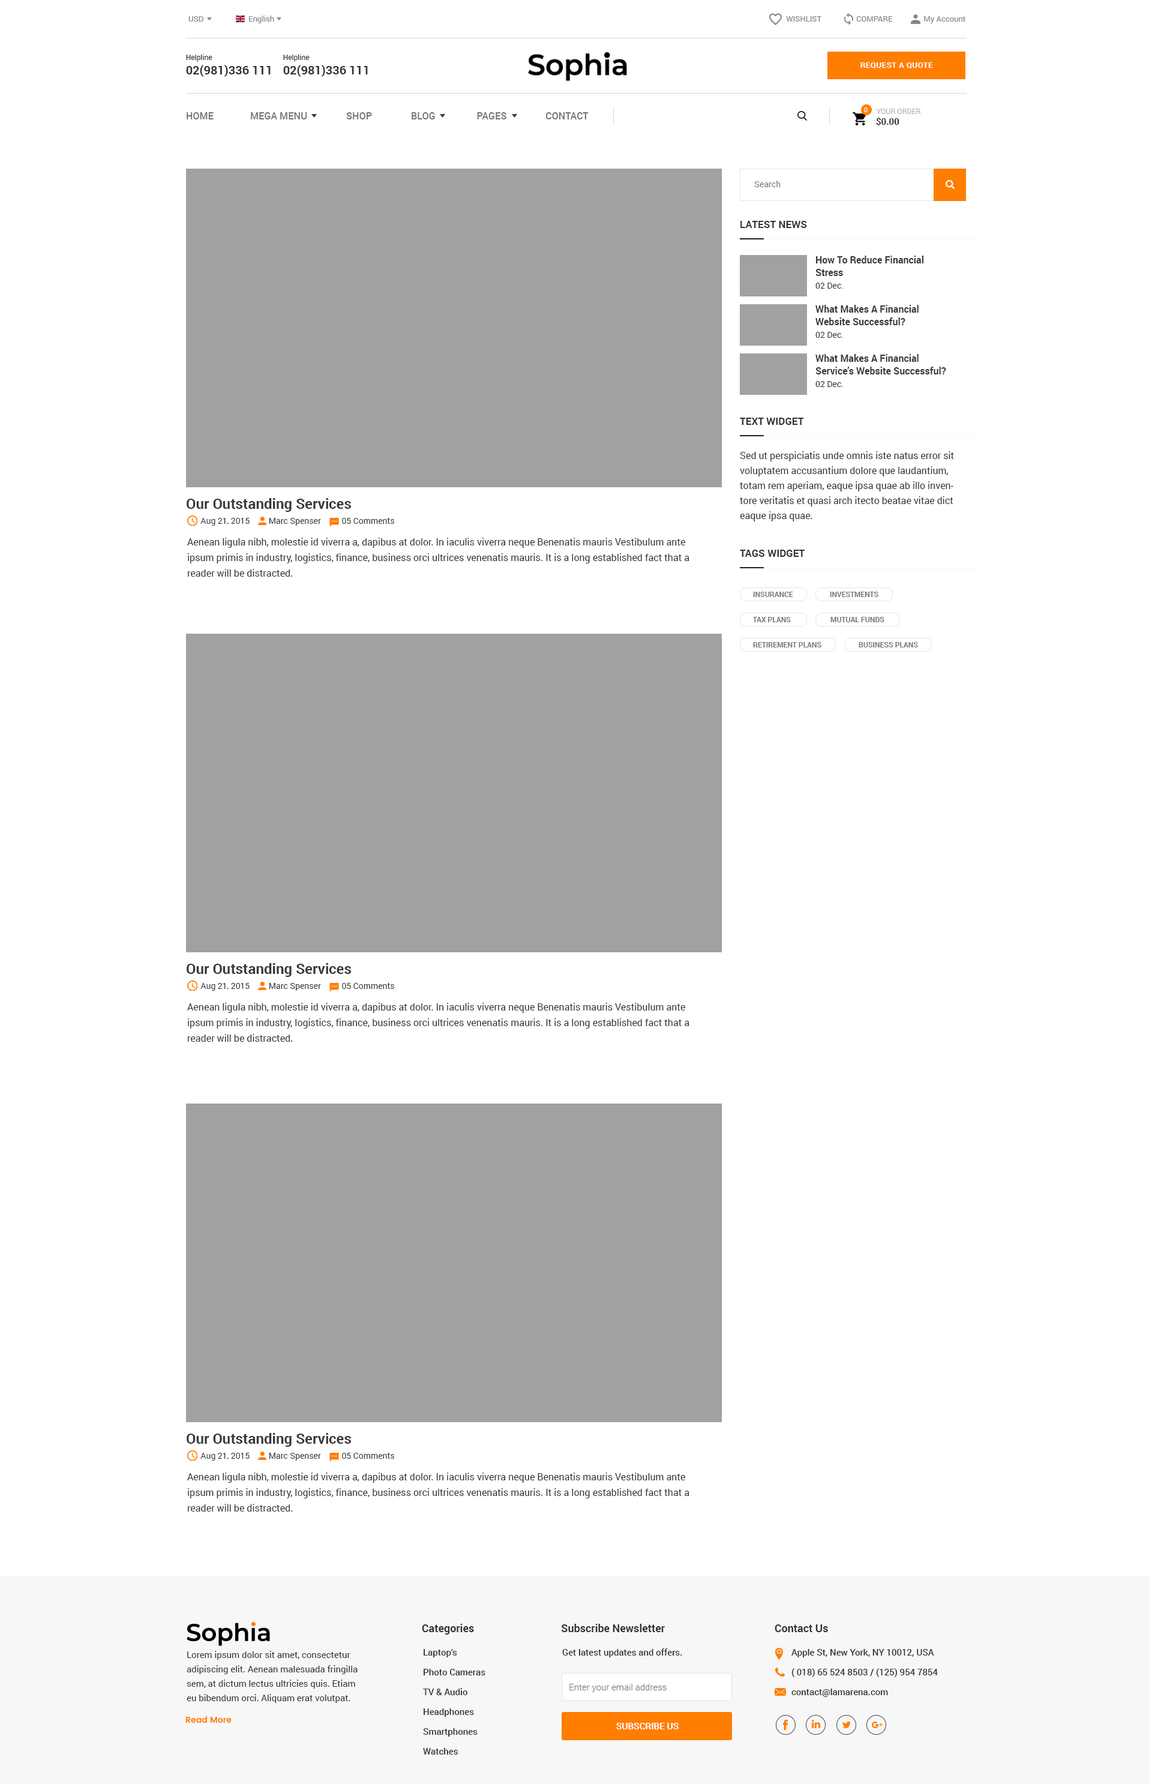
<style>
.page{position:relative;width:1152px;height:1784px;background:#ffffff}
.page>*{position:absolute;margin:0}
.t1{font:7.8px "Roboto-Regular";color:#81858c}
.t2{font:12px "Roboto-Bold";color:#333333}
.t3{font:7.2px "Roboto-Regular";color:#333333}
.t4{font:7.8px "Roboto-Bold";letter-spacing:0.04em;color:#ffffff}
.t5{font:9.6px "Roboto-Medium";color:#737373}
.t6{font:6.6px "Roboto-Regular";color:#ffffff}
.t7{font:7.2px "Roboto-Regular";color:#b8b7b7}
.t8{font:9px "Roboto-Bold";color:#333333}
.t9{font:8.4px "Roboto-Regular";color:#777777}
.t10{font:10.2px "Roboto-Bold";color:#333333}
.t11{font:9.6px/12.6px "Roboto-Bold";color:#383838}
.t12{font:8.4px/12.6px "Roboto-Regular";color:#333333}
.t13{font:9.6px/15px "Roboto-Regular";color:#333333}
.t14{font:8.4px/15px "Roboto-Regular";color:#333333}
.t15{font:14.4px/15px "Roboto-Bold";color:#383838}
.t16{font:9.6px/15.6px "Roboto-Regular";color:#333333}
.t17{font:7.2px "Roboto-Bold";color:#787878}
.t18{font:10.8px "Roboto-Bold";color:#333333}
.t19{font:9px/19.8px "Roboto-Medium";color:#333333}
.t20{font:9px "Roboto-Medium";color:#333333}
.t21{font:9px/14.4px "Roboto-Regular";color:#333333}
.t22{font:9px "Roboto-Light";color:#777777}
.t23{font:8.1px "Poppins-SemiBold";color:#ff7e00}
.t24{font:9px "Roboto-Bold";color:#ffffff}
</style>
<div class="page">
<p class="t1" style="left:188px;top:16px;width:15px;height:6px">USD</p>
<p class="t1" style="left:249px;top:16px;width:25px;height:7px">English</p>
<p class="t1" style="left:786px;top:16px;width:179px;height:7px">WISHLIST                  COMPARE                My Account</p>
<p class="t2" style="left:186px;top:54px;width:85px;height:23px"><span class="t3">Helpline<br></span>02(981)336 111</p>
<p class="t2" style="left:283px;top:54px;width:85px;height:23px"><span class="t3">Helpline<br></span>02(981)336 111</p>
<p class="t4" style="left:860px;top:62px;width:73px;height:6px">REQUEST A QUOTE</p>
<p class="t5" style="left:187px;top:112px;width:402px;height:7px">HOME               MEGA MENU                SHOP                BLOG                 PAGES                CONTACT</p>
<p class="t6" style="left:864px;top:107px;width:4px;height:5px">0</p>
<p class="t7" style="left:877px;top:109px;width:43px;height:5px">YOUR ORDER</p>
<p class="t8" style="left:876px;top:117px;width:23px;height:9px">$0.00</p>
<p class="t9" style="left:754px;top:181px;width:27px;height:6px">Search</p>
<p class="t10" style="left:740px;top:221px;width:67px;height:7px">LATEST NEWS</p>
<p class="t11" style="left:815px;top:256px;width:108px;height:33px">How To Reduce Financial Stress <br><span class="t12">02 Dec.</span></p>
<p class="t11" style="left:815px;top:305px;width:104px;height:33px">What Makes A Financial Website Successful?  <br><span class="t12">02 Dec.</span></p>
<p class="t11" style="left:815px;top:354px;width:131px;height:33px">What Makes A Financial Service’s Website Successful?  <br><span class="t12">02 Dec.</span></p>
<p class="t10" style="left:740px;top:418px;width:64px;height:7px">TEXT WIDGET</p>
<p class="t13" style="left:740px;top:451px;width:214px;height:70px">Sed ut perspiciatis unde omnis iste natus error sit voluptatem accusantium dolore que laudantium, totam rem aperiam, eaque ipsa quae ab illo inventore veritatis et quasi arch itecto beatae vitae dict eaque ipsa quae.</p>
<p class="t14" style="left:187px;top:498px;width:207px;height:28px"><span class="t15">Our Outstanding Services <br></span>       Aug 21, 2015         Marc Spenser          05 Comments</p>
<p class="t16" style="left:187px;top:538px;width:502px;height:39px">Aenean ligula nibh, molestie id viverra a, dapibus at dolor. In iaculis viverra neque Benenatis mauris Vestibulum ante ipsum primis in industry, logistics, finance, business orci ultrices venenatis mauris. It is a long established fact that a reader will be distracted.</p>
<p class="t10" style="left:740px;top:550px;width:65px;height:7px">TAGS WIDGET</p>
<p class="t17" style="left:753px;top:592px;width:40px;height:5px">INSURANCE</p>
<p class="t17" style="left:830px;top:592px;width:48px;height:5px">INVESTMENTS</p>
<p class="t17" style="left:753px;top:617px;width:38px;height:5px">TAX PLANS</p>
<p class="t17" style="left:830px;top:617px;width:54px;height:5px">MUTUAL FUNDS</p>
<p class="t17" style="left:753px;top:642px;width:68px;height:5px">RETIREMENT PLANS</p>
<p class="t17" style="left:859px;top:642px;width:59px;height:5px">BUSINESS PLANS</p>
<p class="t14" style="left:187px;top:963px;width:207px;height:28px"><span class="t15">Our Outstanding Services <br></span>       Aug 21, 2015         Marc Spenser          05 Comments</p>
<p class="t16" style="left:187px;top:1003px;width:502px;height:39px">Aenean ligula nibh, molestie id viverra a, dapibus at dolor. In iaculis viverra neque Benenatis mauris Vestibulum ante ipsum primis in industry, logistics, finance, business orci ultrices venenatis mauris. It is a long established fact that a reader will be distracted.</p>
<p class="t14" style="left:187px;top:1433px;width:207px;height:27px"><span class="t15">Our Outstanding Services <br></span>       Aug 21, 2015         Marc Spenser          05 Comments</p>
<p class="t16" style="left:187px;top:1472px;width:502px;height:39px">Aenean ligula nibh, molestie id viverra a, dapibus at dolor. In iaculis viverra neque Benenatis mauris Vestibulum ante ipsum primis in industry, logistics, finance, business orci ultrices venenatis mauris. It is a long established fact that a reader will be distracted.</p>
<p class="t18" style="left:422px;top:1624px;width:52px;height:10px">Categories</p>
<p class="t18" style="left:561px;top:1624px;width:104px;height:8px">Subscribe Newsletter</p>
<p class="t18" style="left:775px;top:1624px;width:53px;height:8px">Contact Us</p>
<p class="t19" style="left:423px;top:1649px;width:62px;height:105px">Laptop’s<br>Photo Cameras<br>TV &amp; Audio<br>Headphones<br>Smartphones<br>Watches</p>
<p class="t20" style="left:562px;top:1648px;width:120px;height:9px">Get latest updates and offers.</p>
<p class="t19" style="left:791px;top:1649px;width:147px;height:48px">Apple St, New York, NY 10012, USA<br>( 018) 65 524 8503 / (125) 954 7854<br>contact@lamarena.com</p>
<p class="t21" style="left:187px;top:1651px;width:171px;height:52px">Lorem ipsum dolor sit amet, consectetur adipiscing elit. Aenean malesuada fringilla sem, at dictum lectus ultricies quis. Etiam eu bibendum orci. Aliquam erat volutpat.</p>
<p class="t22" style="left:569px;top:1684px;width:98px;height:8px">Enter your email address</p>
<p class="t23" style="left:185px;top:1716px;width:47px;height:7px">Read More</p>
<p class="t24" style="left:616px;top:1723px;width:63px;height:6px">SUBSCRIBE US</p>
</div>
